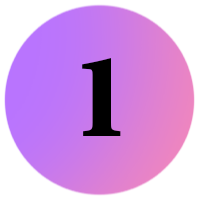
<style>
.page{position:relative;width:200px;height:200px;background:#ffffff}
.page>*{position:absolute;margin:0}
.t1{font:122.7px "MinionStd-Black";color:#000000;scale:0.96 1}
</style>
<div class="page">
<p class="t1" style="left:82px;top:58px;width:39px;height:78px">1</p>
</div>
